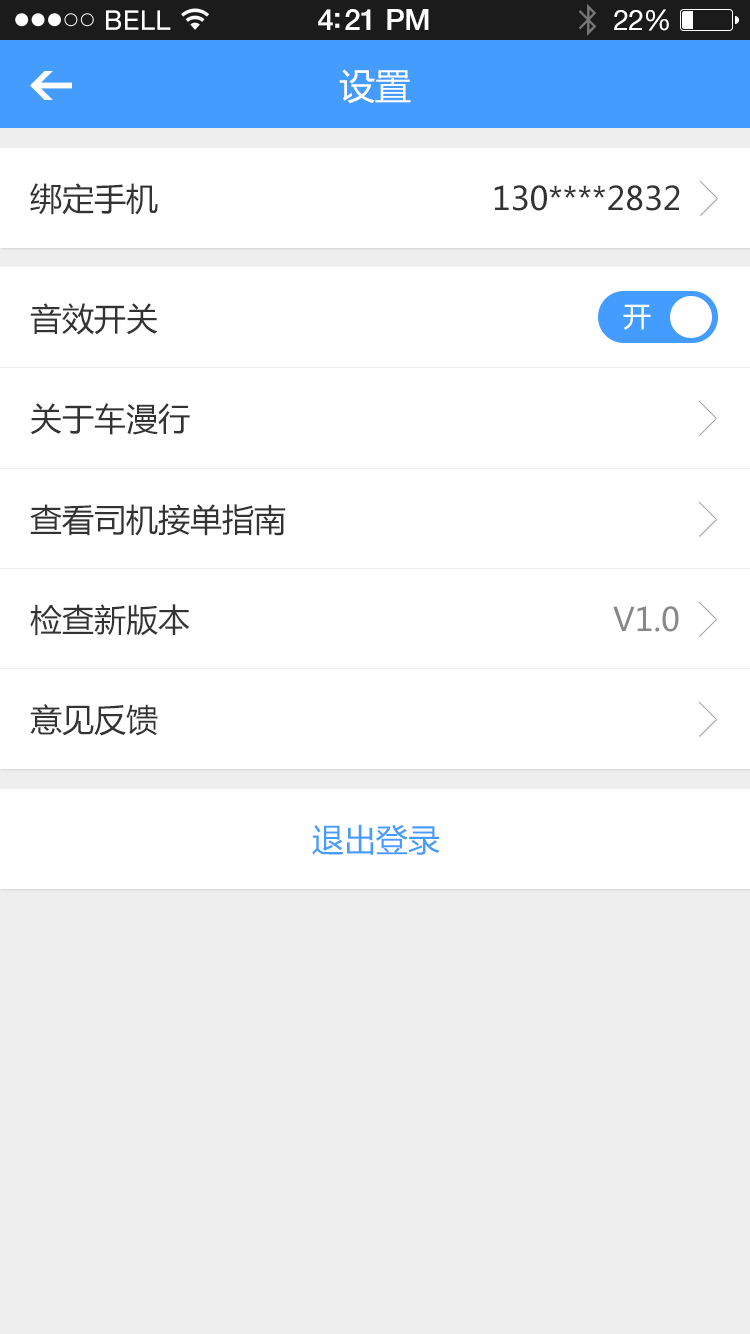
<style>
.page{position:relative;width:750px;height:1334px;background:#ffffff}
.page>*{position:absolute;margin:0}
.t1{font:36px "MicrosoftYaHei";color:#ffffff}
.t2{font:32px "MicrosoftYaHei";color:#333333}
.t3{font:28px "MicrosoftYaHei";color:#ffffff}
.t4{font:32px "MicrosoftYaHei";color:#888888}
.t5{font:32px "MicrosoftYaHei";color:#449cff}
</style>
<div class="page">
<p class="t1" style="left:339px;top:69px;width:72px;height:35px">设置</p>
<p class="t2" style="left:30px;top:183px;width:128px;height:32px">绑定手机</p>
<p class="t2" style="left:494px;top:185px;width:186px;height:26px">130****2832</p>
<p class="t2" style="left:30px;top:303px;width:128px;height:32px">音效开关</p>
<p class="t3" style="left:623px;top:304px;width:28px;height:26px">开</p>
<p class="t2" style="left:30px;top:403px;width:160px;height:32px">关于车漫行</p>
<p class="t2" style="left:30px;top:504px;width:256px;height:32px">查看司机接单指南</p>
<p class="t2" style="left:30px;top:604px;width:160px;height:32px">检查新版本</p>
<p class="t4" style="left:613px;top:606px;width:66px;height:26px">V1.0</p>
<p class="t2" style="left:30px;top:704px;width:128px;height:32px">意见反馈</p>
<p class="t5" style="left:312px;top:824px;width:128px;height:31px">退出登录</p>
</div>
